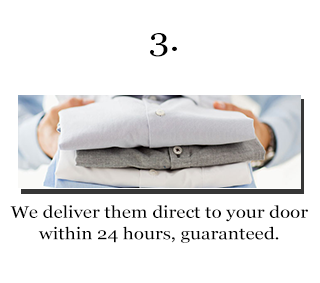
<style>
.page{position:relative;width:320px;height:283px;background:#ffffff}
.page>*{position:absolute;margin:0}
.t1{font:32.8px "Georgia";color:#000000;scale:1.15 1}
.t2{font:16.4px "Georgia";color:#000000;scale:1.15 1}
</style>
<div class="page">
<p class="t1" style="left:150px;top:33px;width:27px;height:24px">3.</p>
<p class="t2" style="left:10px;top:205px;width:298px;height:38px;text-align:center">We deliver them direct to your door<br>within 24 hours, guaranteed.</p>
</div>
